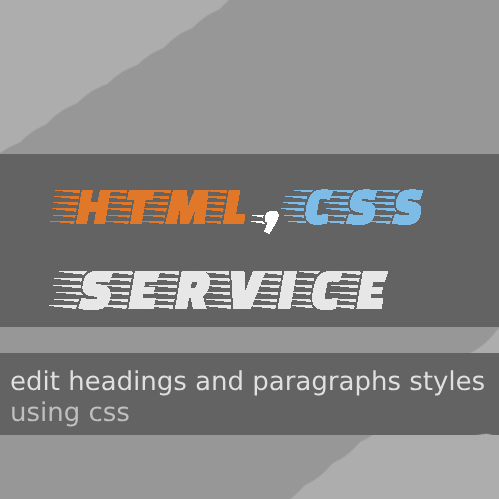
<style>
.page{position:relative;width:499px;height:499px;background:#636363}
.page>*{position:absolute;margin:0}
.t1{font:71px "FasterOne-Regular";color:#e7e7e7}
.t2{font:64px "FasterOne-Regular";color:#e17729}
.t3{font:64px "FasterOne-Regular";color:#ffffff}
.t4{font:64px "FasterOne-Regular";color:#7ebce8}
.t5{font:26px "DejaVuSans";color:#e1e0e0}
.t6{font:26px "DejaVuSans";color:#bfbfbf}
</style>
<div class="page">
<p class="t1" style="left:46px;top:189px;width:378px;height:121px"><span class="t2">html </span><span class="t3">, </span><span class="t4">css <br></span>service</p>
<p class="t5" style="left:11px;top:370px;width:473px;height:57px">edit headings and paragraphs styles<br><span class="t6">using css</span></p>
</div>
